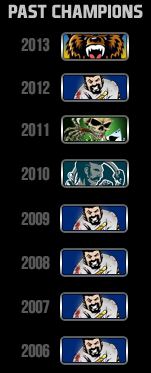
<style>
.page{position:relative;width:151px;height:373px;background:#000000}
.page>*{position:absolute;margin:0}
.t1{font:18px "BebasNeue";letter-spacing:-0.03em;color:#585858;font-weight:bold}
</style>
<div class="page">
<p class="t1" style="left:21px;top:38px;width:29px;height:14px">2013</p>
<p class="t1" style="left:21px;top:81px;width:29px;height:14px">2012</p>
<p class="t1" style="left:21px;top:123px;width:28px;height:14px">2011</p>
<p class="t1" style="left:21px;top:167px;width:29px;height:14px">2010</p>
<p class="t1" style="left:21px;top:212px;width:29px;height:14px">2009</p>
<p class="t1" style="left:21px;top:256px;width:29px;height:14px">2008</p>
<p class="t1" style="left:21px;top:300px;width:29px;height:14px">2007</p>
<p class="t1" style="left:21px;top:344px;width:29px;height:14px">2006</p>
</div>
